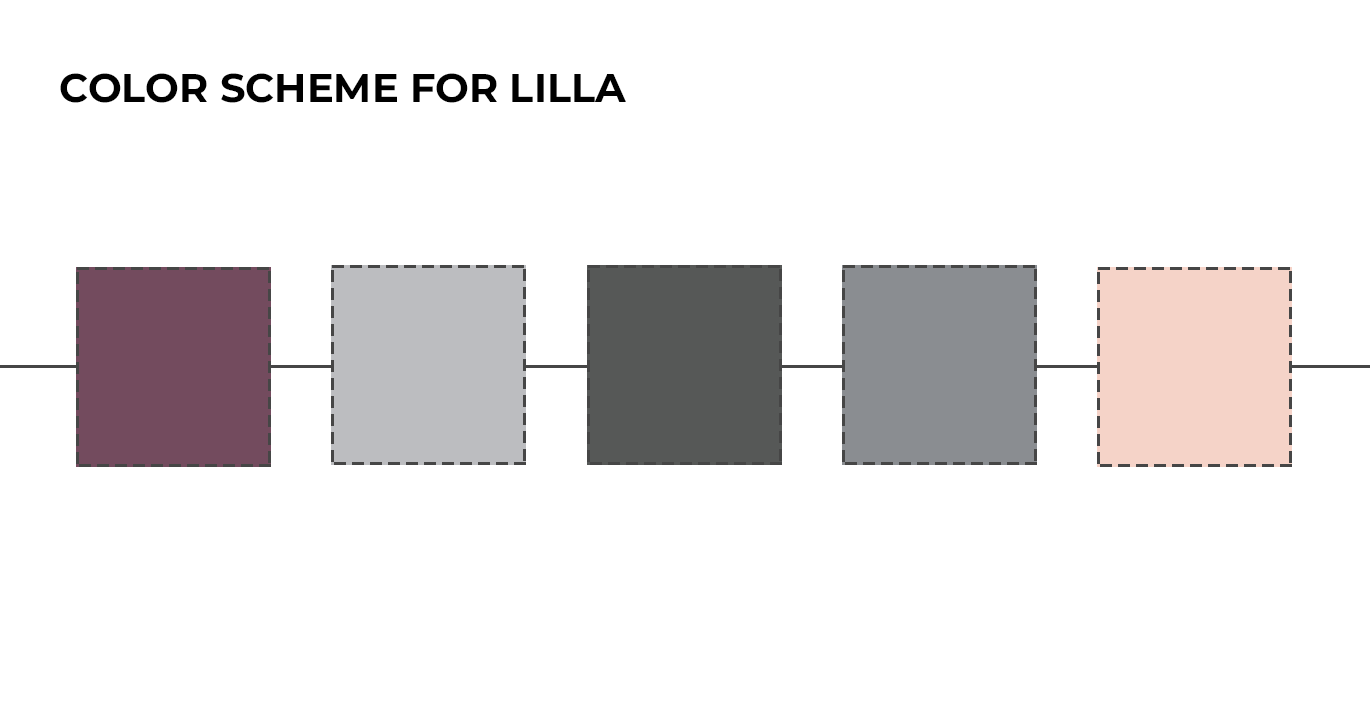
<style>
.page{position:relative;width:1370px;height:712px;background:#ffffff}
.page>*{position:absolute;margin:0}
.t1{font:40px "Montserrat-Bold";color:#000000;text-transform:uppercase}
</style>
<div class="page">
<p class="t1" style="left:60px;top:73px;width:566px;height:30px">Color Scheme for Lilla</p>
</div>
